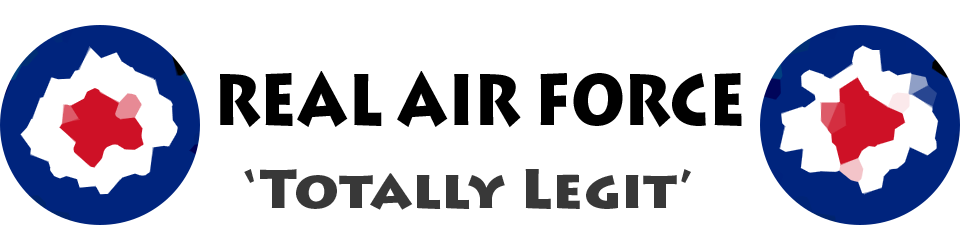
<style>
.page{position:relative;width:960px;height:250px;background:#ffffff}
.page>*{position:absolute;margin:0}
.t1{font:72.1px "LithosPro-Black";color:#000000;scale:0.83 1}
.t2{font:55px "LithosPro-Black";color:#383838}
</style>
<div class="page">
<p class="t1" style="left:220px;top:71px;width:522px;height:57px">REAL AIR FORCE</p>
<p class="t2" style="left:244px;top:169px;width:447px;height:41px">‘Totally Legit’</p>
</div>
